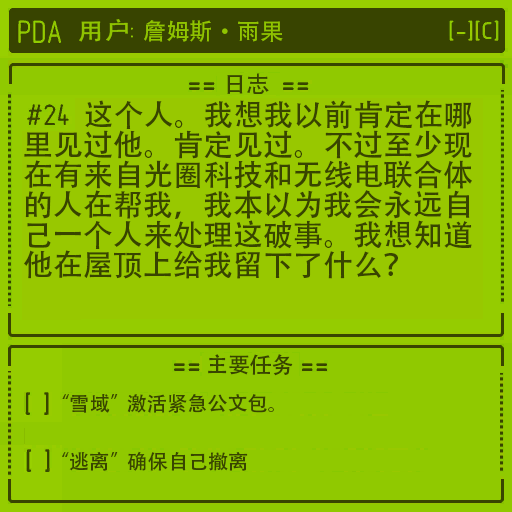
<style>
.page{position:relative;width:512px;height:512px;background:#90c900}
.page>*{position:absolute;margin:0}
.t1{font:30px/30px "AdobeHeitiStd-Regular";color:#384400}
</style>
<div class="page">
<p class="t1" style="left:24px;top:100px;width:448px;height:179px">这个人。我想我以前肯定在哪<br>里见过他。肯定见过。不过至少现<br>在有来自光圈科技和无线电联合体<br>的人在帮我，我本以为我会永远自<br>己一个人来处理这破事。我想知道<br>他在屋顶上给我留下了什么？</p>
</div>
